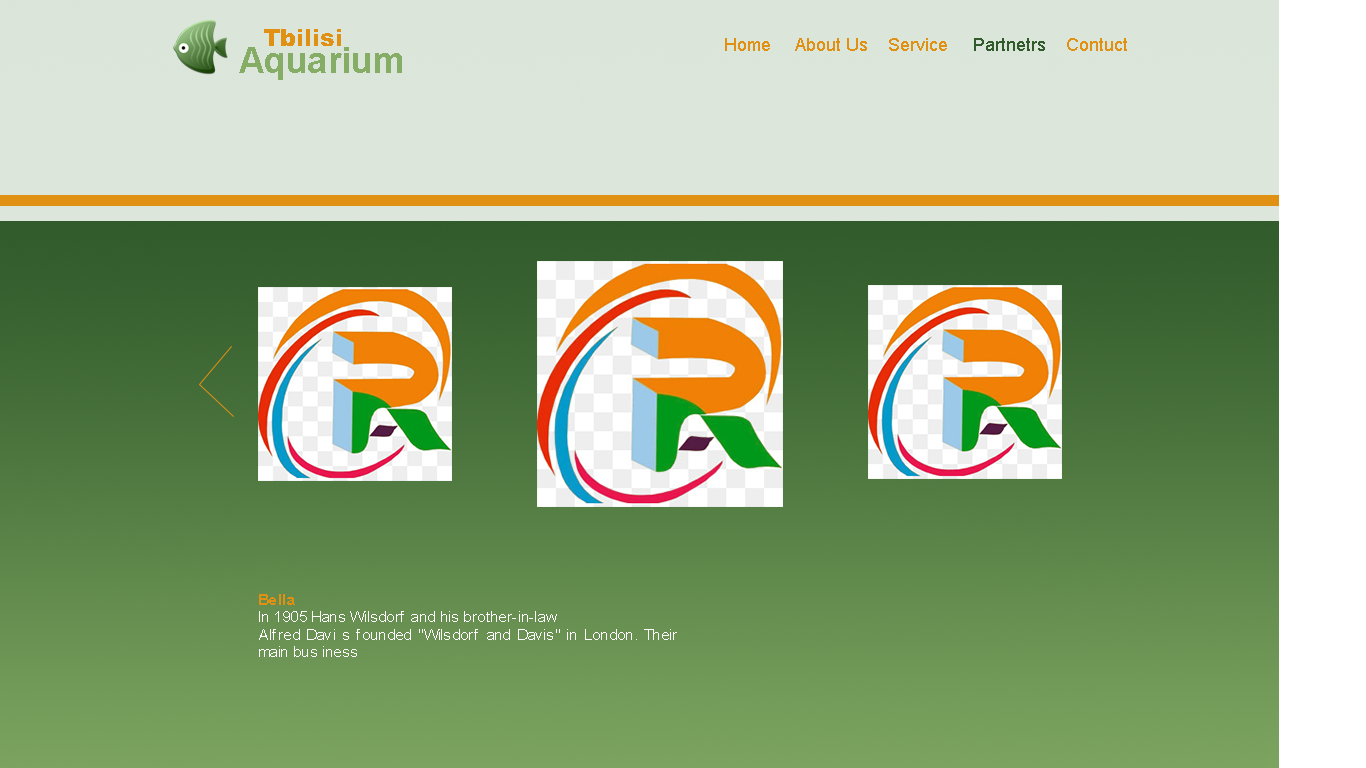
<style>
.page{position:relative;width:1366px;height:768px}
.page>*{position:absolute;margin:0}
.t1{font:23.6px "Arial-Black";color:#e09013}
.t2{font:18px "ArialMT";color:#e09013}
.t3{font:18px "ArialMT";color:#315b2b}
.t4{font:36px "Arial-BoldMT";color:#85ad66}
.t5{font:14.7px "ArialMT";color:#ffffff;scale:1.06 1}
.t6{font:14.7px "Arial-BoldMT";color:#e09013;scale:1.06 1}
</style>
<div class="page">
<p class="t1" style="left:264px;top:29px;width:77px;height:17px">Tbilisi</p>
<p class="t2" style="left:725px;top:38px;width:402px;height:13px">Home     About Us    Service     <span class="t3">Partnetrs    </span>Contuct</p>
<p class="t4" style="left:239px;top:47px;width:163px;height:33px">Aquarium</p>
<p class="t5" style="left:259px;top:594px;width:418px;height:63px;text-align:justify"><span class="t6">Bella<br></span>In 1905 Hans Wilsdorf and his brother-in-law <br>Alfred Davi s founded "Wilsdorf and Davis" in London. Their main bus iness</p>
</div>
